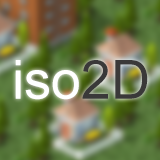
<style>
.page{position:relative;width:160px;height:160px}
.page>*{position:absolute;margin:0}
.t1{font:54px "ArialMT";color:#ffffff}
.t2{font:54px "ArialMT";color:#3a3939}
</style>
<div class="page">
<p class="t1" style="left:15px;top:60px;width:133px;height:40px">iso<span class="t2">2D</span></p>
</div>
